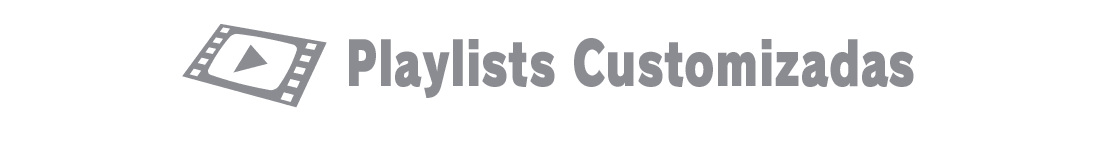
<style>
.page{position:relative;width:1110px;height:144px;background:#ffffff}
.page>*{position:absolute;margin:0}
.t1{font:60px "RodinPro-UB";letter-spacing:0.001em;color:#8b8c92;scale:0.76 1}
</style>
<div class="page">
<p class="t1" style="left:349px;top:38px;width:565px;height:60px">Playlists Customizadas</p>
</div>
